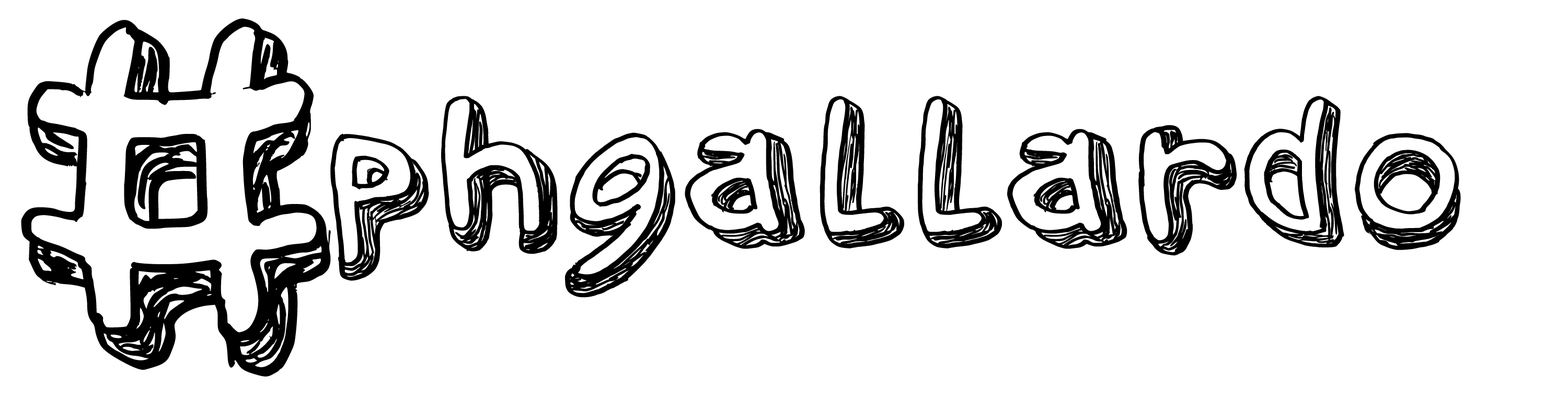
<style>
.page{position:relative;width:1568px;height:408px;background:#ffffff}
.page>*{position:absolute;margin:0}
.t1{font:522.7px "ARTHISTORYBOOKRegular";color:#000000}
.t2{font:217.8px "ARTHISTORYBOOKRegular";color:#000000}
</style>
<div class="page">
<p class="t1" style="left:21px;top:18px;width:310px;height:358px">#</p>
<p class="t2" style="left:330px;top:96px;width:1131px;height:201px"><span class="t1"> </span>phgallardo</p>
</div>
